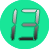
<style>
.page{position:relative;width:49px;height:49px;background:#18e698}
.page>*{position:absolute;margin:0}
.t1{font:48px "Digital-7Italic"}
</style>
<div class="page">
<p class="t1" style="left:10px;top:9px;width:30px;height:32px">13</p>
</div>
